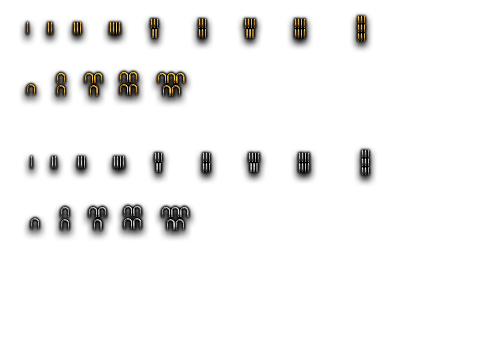
<style>
.page{position:relative;width:504px;height:360px;background:#ffffff}
.page>*{position:absolute;margin:0}
.t1{font:30px "AegyptusBold"}
</style>
<div class="page">
<p class="t1" style="left:358px;top:16px;width:7px;height:25px">󴪰</p>
<p class="t1" style="left:27px;top:22px;width:1px;height:12px">󴪨</p>
<p class="t1" style="left:48px;top:22px;width:4px;height:12px">󴪩</p>
<p class="t1" style="left:74px;top:22px;width:7px;height:12px">󴪪</p>
<p class="t1" style="left:110px;top:22px;width:10px;height:12px">󴪫</p>
<p class="t1" style="left:151px;top:19px;width:7px;height:19px">󴪬</p>
<p class="t1" style="left:199px;top:19px;width:7px;height:19px">󴪭</p>
<p class="t1" style="left:245px;top:19px;width:10px;height:19px">󴪮</p>
<p class="t1" style="left:295px;top:19px;width:10px;height:19px">󴪯</p>
<p class="t1" style="left:57px;top:73px;width:8px;height:23px">󴣠</p>
<p class="t1" style="left:85px;top:73px;width:17px;height:23px">󴣡</p>
<p class="t1" style="left:120px;top:72px;width:17px;height:23px">󴣢</p>
<p class="t1" style="left:158px;top:73px;width:27px;height:23px">󴣣</p>
<p class="t1" style="left:27px;top:84px;width:8px;height:11px">󴣟</p>
<p class="t1" style="left:362px;top:150px;width:7px;height:25px">󴪰</p>
<p class="t1" style="left:31px;top:156px;width:1px;height:12px">󴪨</p>
<p class="t1" style="left:52px;top:156px;width:4px;height:12px">󴪩</p>
<p class="t1" style="left:78px;top:156px;width:7px;height:12px">󴪪</p>
<p class="t1" style="left:114px;top:156px;width:10px;height:12px">󴪫</p>
<p class="t1" style="left:155px;top:153px;width:7px;height:19px">󴪬</p>
<p class="t1" style="left:203px;top:153px;width:7px;height:19px">󴪭</p>
<p class="t1" style="left:249px;top:153px;width:10px;height:19px">󴪮</p>
<p class="t1" style="left:299px;top:153px;width:10px;height:19px">󴪯</p>
<p class="t1" style="left:61px;top:207px;width:8px;height:23px">󴣠</p>
<p class="t1" style="left:89px;top:207px;width:17px;height:23px">󴣡</p>
<p class="t1" style="left:124px;top:206px;width:17px;height:23px">󴣢</p>
<p class="t1" style="left:162px;top:207px;width:27px;height:23px">󴣣</p>
<p class="t1" style="left:31px;top:218px;width:8px;height:11px">󴣟</p>
</div>
